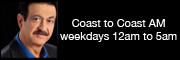
<style>
.page{position:relative;width:180px;height:60px;background:#000000}
.page>*{position:absolute;margin:0}
.t1{font:11px "HelveticaNeue";color:#ffffff}
</style>
<div class="page">
<p class="t1" style="left:60px;top:19px;width:117px;height:23px;text-align:center">Coast to Coast AM<br>weekdays 12am to 5am</p>
</div>
